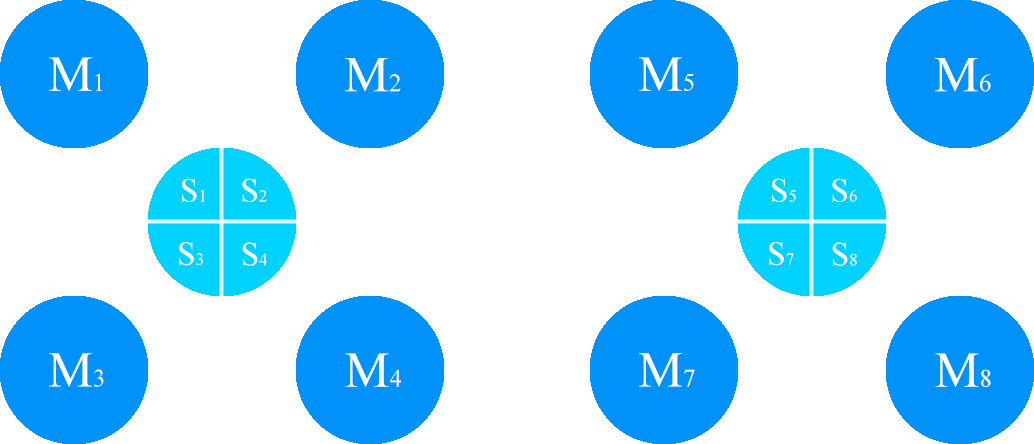
<style>
.page{position:relative;width:1034px;height:444px;background:#ffffff}
.page>*{position:absolute;margin:0}
.t1{font:50px "TimesNewRomanPSMT";color:#ffffff}
.t2{font:25px "TimesNewRomanPSMT";color:#ffffff}
.t3{font:33.3px "TimesNewRomanPSMT";color:#ffffff}
.t4{font:16.7px "TimesNewRomanPSMT";color:#ffffff}
</style>
<div class="page">
<p class="t1" style="left:49px;top:57px;width:53px;height:34px">M<span class="t2">1</span></p>
<p class="t1" style="left:345px;top:58px;width:56px;height:34px">M<span class="t2">2</span></p>
<p class="t1" style="left:639px;top:57px;width:55px;height:34px">M<span class="t2">5</span></p>
<p class="t1" style="left:935px;top:58px;width:56px;height:34px">M<span class="t2">6</span></p>
<p class="t3" style="left:182px;top:178px;width:23px;height:24px">S<span class="t4">1</span></p>
<p class="t3" style="left:242px;top:178px;width:25px;height:24px">S<span class="t4">2</span></p>
<p class="t3" style="left:772px;top:178px;width:24px;height:24px">S<span class="t4">5</span></p>
<p class="t3" style="left:832px;top:178px;width:25px;height:24px">S<span class="t4">6</span></p>
<p class="t3" style="left:179px;top:242px;width:24px;height:24px">S<span class="t4">3</span></p>
<p class="t3" style="left:242px;top:242px;width:25px;height:24px">S<span class="t4">4</span></p>
<p class="t3" style="left:769px;top:242px;width:25px;height:24px">S<span class="t4">7</span></p>
<p class="t3" style="left:832px;top:242px;width:25px;height:24px">S<span class="t4">8</span></p>
<p class="t1" style="left:49px;top:353px;width:55px;height:34px">M<span class="t2">3</span></p>
<p class="t1" style="left:345px;top:353px;width:56px;height:34px">M<span class="t2">4</span></p>
<p class="t1" style="left:639px;top:353px;width:56px;height:34px">M<span class="t2">7</span></p>
<p class="t1" style="left:935px;top:353px;width:56px;height:34px">M<span class="t2">8</span></p>
</div>
